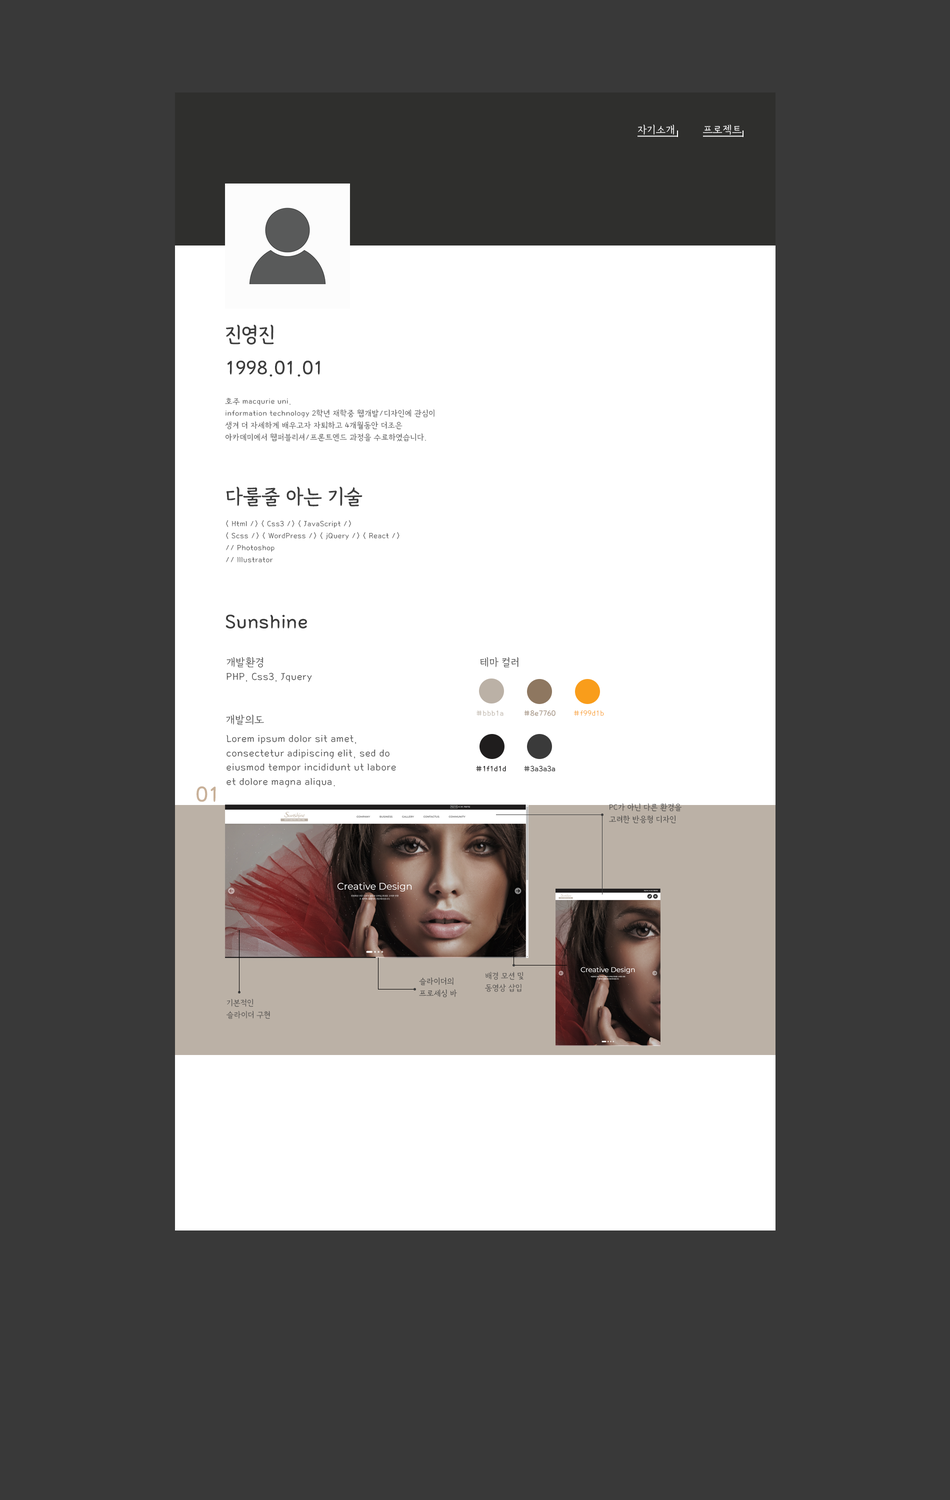
<style>
.page{position:relative;width:950px;height:1500px;background:#393939}
.page>*{position:absolute;margin:0}
.t1{font:12px "GangwonEduAllLight";color:#ffffff}
.t2{font:22.5px/33.3px "GangwonEduAllBold";color:#3c3c3c}
.t3{font:9px/12px "GangwonEduAllLight";letter-spacing:0.01em;color:#3c3c3c}
.t4{font:22.5px "GangwonEduAllBold";color:#3c3c3c}
.t5{font:9px/12px "GangwonEduAllLight";color:#3c3c3c}
.t6{font:12px "GangwonEduAllLight";color:#3c3c3c}
.t7{font:9px "GangwonEduAllLight";color:#bbb1a6}
.t8{font:9px "GangwonEduAllLight"}
.t9{font:9px "GangwonEduAllLight";color:#f99d1b}
.t10{font:9px "GangwonEduAllBold";color:#1f1d1d}
.t11{font:9px "GangwonEduAllBold";color:#3a3a3a}
.t12{font:25px "GangwonEduAllBold";color:#c8b098}
.t13{font:9px/12px "GangwonEduAllLight";color:#484746}
</style>
<div class="page">
<p class="t1" style="left:638px;top:124px;width:36px;height:11px">자기소개</p>
<p class="t1" style="left:703px;top:124px;width:39px;height:11px">프로젝트</p>
<p class="t2" style="left:226px;top:324px;width:94px;height:53px">진영진<br>1998.01.01</p>
<p class="t3" style="left:225px;top:397px;width:209px;height:44px">호주 macqurie uni. <br>information technology 2학년 재학중 웹개발/디자인에 관심이 생겨 더 자세하게 배우고자 자퇴하고 4개월동안 더조은 아카데미에서 웹퍼블리셔/프론트엔드 과정을 수료하였습니다.</p>
<p class="t4" style="left:226px;top:486px;width:136px;height:20px">다룰줄 아는 기술</p>
<p class="t5" style="left:226px;top:520px;width:173px;height:42px">&lt; Html /&gt; &lt; Css3 /&gt; &lt; JavaScript /&gt; <br>&lt; Scss /&gt; &lt; WordPress /&gt; &lt; jQuery /&gt; &lt; React /&gt;<br>// Photoshop<br>// Illustrator</p>
<p class="t4" style="left:225px;top:614px;width:82px;height:14px">Sunshine</p>
<p class="t6" style="left:226px;top:657px;width:86px;height:25px">개발환경<br>PHP, Css3, Jquery</p>
<p class="t6" style="left:480px;top:657px;width:38px;height:10px">테마 컬러</p>
<p class="t7" style="left:476px;top:710px;width:27px;height:6px">#bbb1a6</p>
<p class="t8" style="left:524px;top:710px;width:31px;height:6px">#8e7760</p>
<p class="t9" style="left:573px;top:710px;width:31px;height:6px">#f99d1b</p>
<p class="t6" style="left:226px;top:714px;width:38px;height:11px">개발의도</p>
<p class="t6" style="left:226px;top:735px;width:170px;height:52px">Lorem ipsum dolor sit amet, consectetur adipiscing elit, sed do eiusmod tempor incididunt ut labore et dolore magna aliqua.</p>
<p class="t10" style="left:476px;top:765px;width:30px;height:6px">#1f1d1d</p>
<p class="t11" style="left:524px;top:765px;width:31px;height:6px">#3a3a3a</p>
<p class="t12" style="left:196px;top:786px;width:20px;height:16px">01</p>
<p class="t5" style="left:609px;top:803px;width:72px;height:20px">PC가 아닌 다른 환경을 고려한 반응형 디자인</p>
<p class="t5" style="left:419px;top:977px;width:38px;height:20px">슬라이더의 프로세싱 바</p>
<p class="t13" style="left:485px;top:971px;width:38px;height:21px">배경 모션 및 동영상 삽입</p>
<p class="t13" style="left:226px;top:998px;width:44px;height:21px">기본적인 슬라이더 구현</p>
</div>
